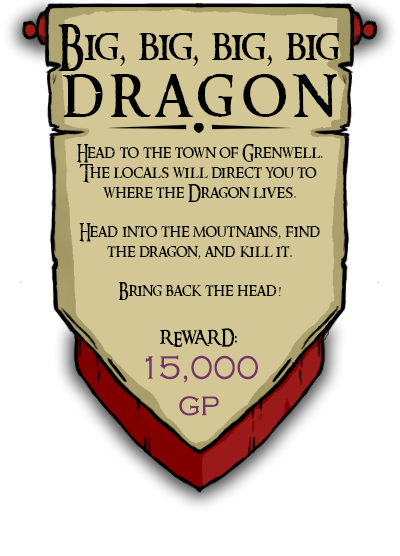
<style>
.page{position:relative;width:400px;height:556px;background:#d3c895}
.page>*{position:absolute;margin:0}
.t1{font:44.8px "RingbearerMedium";color:#000000;scale:0.95 1}
.t2{font:67.2px/56.6px "RingbearerMedium";letter-spacing:0.14em;color:#000000;scale:0.95 1}
.t3{font:17.2px "RingbearerMedium";color:#000000;scale:0.95 1}
.t4{font:33.6px/36.3px "CopperplateGothic-Light";color:#753468;scale:0.95 1}
</style>
<div class="page">
<p class="t1" style="left:58px;top:24px;width:282px;height:93px;text-align:center">Big, big, big, big<br><span class="t2">dragon</span></p>
<p class="t3" style="left:77px;top:144px;width:246px;height:156px;text-align:center">Head to the town of Grenwell.<br>The locals will direct you to <br>where the Dragon lives.<br><br>Head into the moutnains, find<br>the dragon, and kill it.<br><br>Bring back the head!</p>
<p class="t4" style="left:145px;top:328px;width:113px;height:88px;text-align:center"><span class="t3">REWARD:<br></span>15,000<br>gp</p>
</div>
